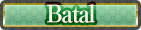
<style>
.page{position:relative;width:141px;height:30px}
.page>*{position:absolute;margin:0}
.t1{font:24px "RyuminPro-ExBold";letter-spacing:-0.08em;color:#fff6f2;scale:0.9 1}
</style>
<div class="page">
<p class="t1" style="left:47px;top:4px;width:48px;height:19px">Batal</p>
</div>
